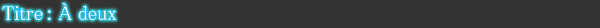
<style>
.page{position:relative;width:600px;height:28px;background:#333333}
.page>*{position:absolute;margin:0}
.t1{font:20px "MS-PMincho";color:#ffffff}
</style>
<div class="page">
<p class="t1" style="left:2px;top:3px;width:115px;height:18px">Titre : À deux</p>
</div>
